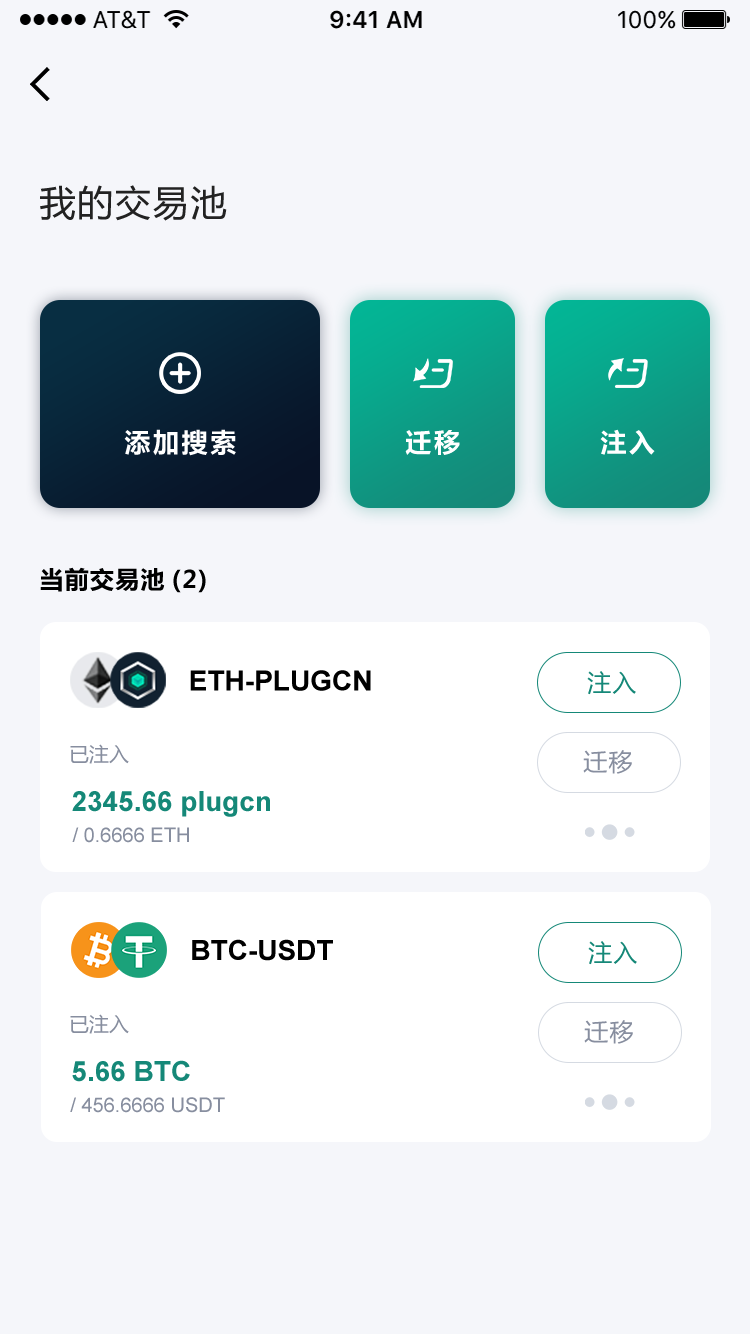
<style>
.page{position:relative;width:750px;height:1334px;background:#f5f6fa}
.page>*{position:absolute;margin:0}
.t1{font:36px "MicrosoftYaHei";letter-spacing:0.05em;color:#222222}
.t2{font:26px "MicrosoftYaHei-Bold";letter-spacing:0.1em;color:#ffffff}
.t3{font:24px "MicrosoftYaHei-Bold";letter-spacing:0.05em;color:#000000}
.t4{font:28px "Arial-BoldMT";color:#000000}
.t5{font:24px "MicrosoftYaHei";letter-spacing:0.05em;color:#158878}
.t6{font:20px "MicrosoftYaHei";color:#878e9f}
.t7{font:24px "MicrosoftYaHei";letter-spacing:0.05em;color:#878e9f}
.t8{font:28px "Arial-BoldMT";color:#158878}
.t9{font:20px "ArialMT";color:#878e9f}
</style>
<div class="page">
<p class="t1" style="left:40px;top:185px;width:187px;height:36px">我的交易池</p>
<p class="t2" style="left:124px;top:429px;width:112px;height:27px">添加搜索</p>
<p class="t2" style="left:405px;top:430px;width:55px;height:25px">迁移</p>
<p class="t2" style="left:600px;top:429px;width:55px;height:26px">注入</p>
<p class="t3" style="left:40px;top:567px;width:166px;height:26px">当前交易池(2)</p>
<p class="t4" style="left:190px;top:670px;width:181px;height:21px">ETH-PLUGCN</p>
<p class="t5" style="left:587px;top:671px;width:49px;height:24px">注入</p>
<p class="t6" style="left:70px;top:744px;width:59px;height:20px">已注入</p>
<p class="t7" style="left:583px;top:750px;width:49px;height:24px">迁移</p>
<p class="t8" style="left:72px;top:791px;width:198px;height:26px">2345.66 plugcn</p>
<p class="t9" style="left:72px;top:827px;width:117px;height:16px">/ 0.6666 ETH</p>
<p class="t4" style="left:192px;top:939px;width:141px;height:22px">BTC-USDT</p>
<p class="t5" style="left:588px;top:941px;width:49px;height:24px">注入</p>
<p class="t6" style="left:70px;top:1014px;width:59px;height:20px">已注入</p>
<p class="t7" style="left:584px;top:1020px;width:49px;height:24px">迁移</p>
<p class="t8" style="left:72px;top:1060px;width:118px;height:22px">5.66 BTC</p>
<p class="t9" style="left:70px;top:1097px;width:155px;height:16px">/ 456.6666 USDT</p>
</div>
